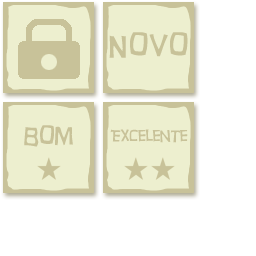
<style>
.page{position:relative;width:256px;height:256px;background:#ffffff}
.page>*{position:absolute;margin:0}
.t1{font:30px "HurryUp-Regular";color:#c8c299}
.t2{font:23.9px "HurryUp-Regular";color:#c8c299}
.t3{font:16px "HurryUp-Regular";color:#c8c299}
</style>
<div class="page">
<p class="t1" style="left:109px;top:32px;width:79px;height:26px">Novo</p>
<p class="t2" style="left:24px;top:125px;width:49px;height:22px">Bom</p>
<p class="t3" style="left:110px;top:129px;width:78px;height:14px">Excelente</p>
</div>
